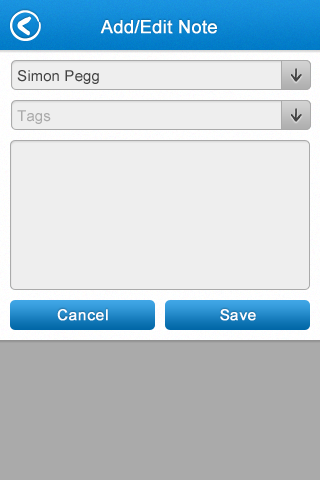
<style>
.page{position:relative;width:320px;height:480px;background:#eeeeee}
.page>*{position:absolute;margin:0}
.t1{font:18px "ArialMT";letter-spacing:0.025em;color:#ffffff;font-weight:bold}
.t2{font:15px "ArialMT";letter-spacing:0.025em;color:#444444}
.t3{font:15px "ArialMT";letter-spacing:0.025em;color:#aaaaaa}
.t4{font:15px "ArialMT";letter-spacing:0.025em;color:#fefcff;font-weight:bold}
</style>
<div class="page">
<p class="t1" style="left:100px;top:20px;width:117px;height:14px">Add/Edit Note</p>
<p class="t2" style="left:17px;top:70px;width:82px;height:14px">Simon Pegg</p>
<p class="t3" style="left:17px;top:110px;width:34px;height:14px">Tags</p>
<p class="t4" style="left:57px;top:309px;width:51px;height:12px">Cancel</p>
<p class="t4" style="left:220px;top:309px;width:36px;height:12px">Save</p>
</div>
